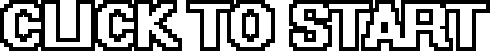
<style>
.page{position:relative;width:490px;height:51px;background:#ffffff}
.page>*{position:absolute;margin:0}
.t1{font:67.5px "System";letter-spacing:-0.025em;color:#ffffff;text-transform:uppercase;font-weight:bold;scale:1.11 1}
</style>
<div class="page">
<p class="t1" style="left:4px;top:4px;width:482px;height:43px">click to start</p>
</div>
